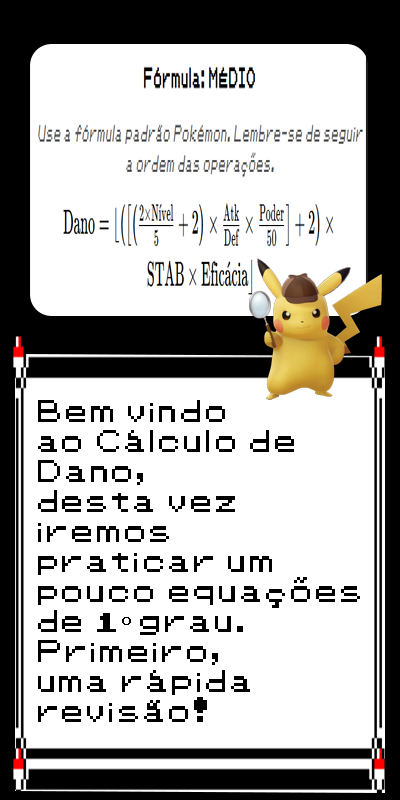
<style>
.page{position:relative;width:400px;height:800px;background:#ffffff}
.page>*{position:absolute;margin:0}
.t1{font:25px "Pokemon-Classic";color:#000000}
.t2{font:25px "MyriadPro-Regular";color:#000000}
</style>
<div class="page">
<p class="t1" style="left:38px;top:400px;width:322px;height:322px">Bem vindo <br>ao Cálculo de <br>Dano, <br>desta vez <br>iremos <br>praticar um <br>pouco equações <br>de 1<span class="t2">º</span> grau.<br>Primeiro, <br>uma rápida <br>revisão!</p>
</div>
